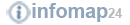
<style>
.page{position:relative;width:130px;height:25px;background:#ffffff}
.page>*{position:absolute;margin:0}
.t1{font:19.7px "Arial-BoldMT";color:#8fa5bc}
.t2{font:12.5px "Arial-BoldMT";color:#8fa5bc}
</style>
<div class="page">
<p class="t1" style="left:32px;top:3px;width:91px;height:19px">infomap<span class="t2">24</span></p>
</div>
